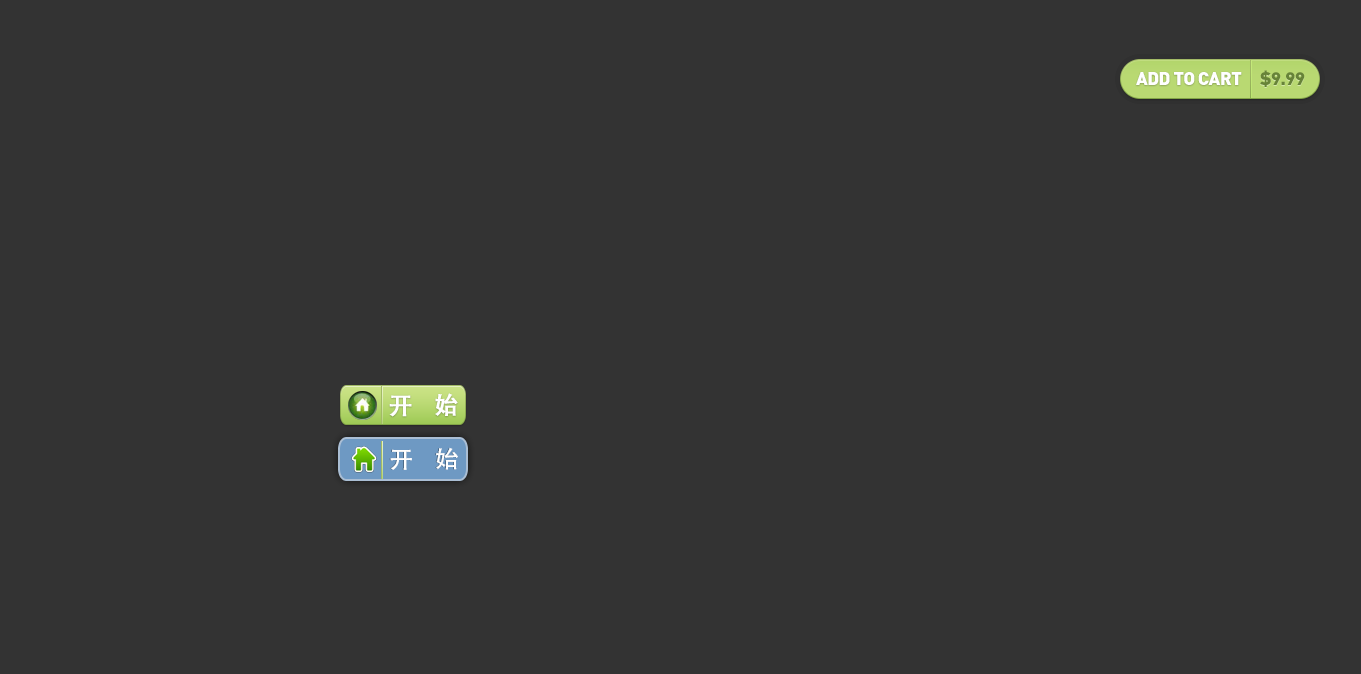
<style>
.page{position:relative;width:1361px;height:674px;background:#333333}
.page>*{position:absolute;margin:0}
.t1{font:18.2px "DIN-Black";letter-spacing:-0.025em;color:#ffffff;text-transform:uppercase}
.t2{font:18px "DIN-Black";letter-spacing:-0.025em;color:#678338;text-transform:uppercase}
.t3{font:24.2px "AdobeHeitiStd-Regular";letter-spacing:-0.025em;color:#ffffff;text-transform:uppercase;font-weight:bold}
.t4{font:24px "AdobeHeitiStd-Regular";text-transform:uppercase}
.t5{font:24px "AdobeHeitiStd-Regular";color:#ffffff;text-transform:uppercase}
</style>
<div class="page">
<p class="t1" style="left:1136px;top:72px;width:106px;height:13px">Add to Cart</p>
<p class="t2" style="left:1260px;top:70px;width:45px;height:17px">$9.99</p>
<p class="t3" style="left:389px;top:393px;width:69px;height:24px">开    始</p>
<p class="t4" style="left:389px;top:447px;width:68px;height:23px">开    始</p>
<p class="t5" style="left:390px;top:447px;width:68px;height:23px">开    始</p>
</div>
